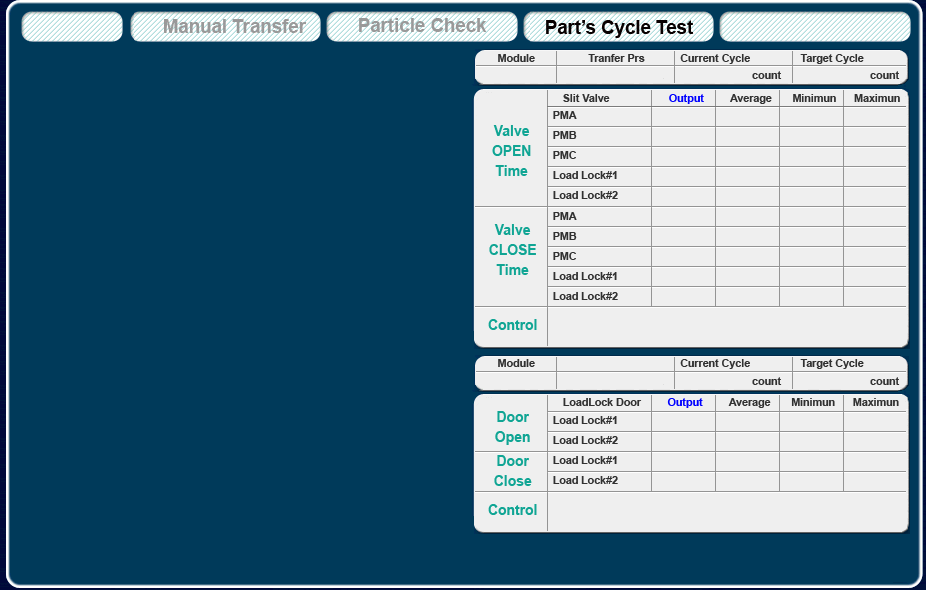
<style>
.page{position:relative;width:926px;height:590px;background:#003a5a}
.page>*{position:absolute;margin:0}
.t1{font:18.7px "Arial-BoldMT";color:#080101}
.t2{font:10.7px "Arial-BoldMT";color:#313131}
.t3{font:10.7px "Arial-BoldMT";color:#0000ff}
.t4{font:10.7px/20px "Arial-BoldMT";color:#313131}
.t5{font:14.7px/20px "Arial-BoldMT";color:#10a594;scale:0.95 1}
.t6{font:14.7px "Arial-BoldMT";color:#10a594;scale:0.95 1}
</style>
<div class="page">
<p class="t1" style="left:546px;top:20px;width:148px;height:18px">Part’s Cycle Test</p>
<p class="t2" style="left:498px;top:54px;width:366px;height:10px">Module                  Tranfer Prs            Current Cycle                 Target Cycle</p>
<p class="t2" style="left:563px;top:94px;width:337px;height:10px">Slit Valve                    <span class="t3">Output</span>         Average       Minimun      Maximun</p>
<p class="t4" style="left:553px;top:111px;width:65px;height:88px">PMA<br>PMB<br>PMC<br>Load Lock#1<br>Load Lock#2</p>
<p class="t5" style="left:492px;top:125px;width:39px;height:51px;text-align:center">Valve<br>OPEN<br>Time</p>
<p class="t4" style="left:553px;top:212px;width:65px;height:88px">PMA<br>PMB<br>PMC<br>Load Lock#1<br>Load Lock#2</p>
<p class="t5" style="left:489px;top:224px;width:47px;height:51px;text-align:center">Valve<br>CLOSE<br>Time</p>
<p class="t6" style="left:488px;top:319px;width:49px;height:11px">Control</p>
<p class="t2" style="left:498px;top:359px;width:366px;height:10px">Module                                                 Current Cycle                 Target Cycle</p>
<p class="t2" style="left:563px;top:398px;width:336px;height:10px">LoadLock Door         <span class="t3">Output</span>         Average       Minimun      Maximun</p>
<p class="t5" style="left:495px;top:411px;width:35px;height:34px;text-align:center">Door<br>Open</p>
<p class="t4" style="left:553px;top:416px;width:65px;height:68px">Load Lock#1<br>Load Lock#2<br>Load Lock#1<br>Load Lock#2</p>
<p class="t5" style="left:494px;top:455px;width:38px;height:31px;text-align:center">Door<br>Close</p>
<p class="t6" style="left:488px;top:504px;width:49px;height:11px">Control</p>
</div>
